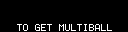
<style>
.page{position:relative;width:128px;height:32px;background:#000000}
.page>*{position:absolute;margin:0}
.t1{font:8px "Terminal";color:#ffffff}
</style>
<div class="page">
<p class="t1" style="left:17px;top:24px;width:95px;height:7px">TO GET MULTIBALL</p>
</div>
